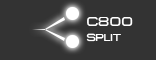
<style>
.page{position:relative;width:156px;height:60px;background:#333333}
.page>*{position:absolute;margin:0}
.t1{font:13px "MetroDF";color:#ffffff}
.t2{font:10.2px "MetroDF";color:#ffffff}
</style>
<div class="page">
<p class="t1" style="left:87px;top:17px;width:46px;height:9px">c800</p>
<p class="t2" style="left:86px;top:33px;width:35px;height:9px">SPLIT</p>
</div>
